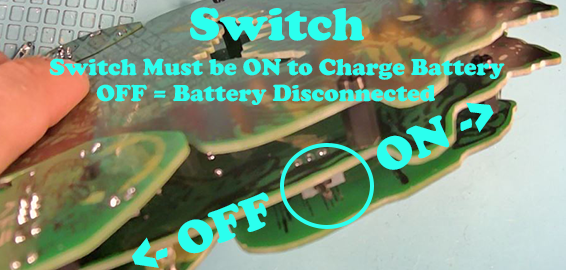
<style>
.page{position:relative;width:566px;height:270px}
.page>*{position:absolute;margin:0}
.t1{font:48px "CooperBlack";color:#2bffee}
.t2{font:24px "CooperBlack";color:#2bffee}
</style>
<div class="page">
<p class="t1" style="left:190px;top:7px;width:174px;height:34px">Switch</p>
<p class="t2" style="left:49px;top:58px;width:456px;height:22px">Switch Must be ON to Charge Battery</p>
<p class="t2" style="left:96px;top:84px;width:339px;height:21px">OFF = Battery Disconnected</p>
<p class="t1" style="left:377px;top:102px;width:117px;height:68px;rotate:-24deg">ON -&gt;</p>
<p class="t1" style="left:132px;top:192px;width:137px;height:76px;rotate:-22deg">&lt;- OFF</p>
</div>
